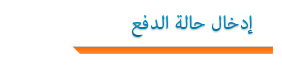
<style>
.page{position:relative;width:282px;height:69px;background:#ffffff}
.page>*{position:absolute;margin:0}
.t1{font:27px "AdobeArabic-Regular";color:#0082b5}
</style>
<div class="page">
<p class="t1" style="left:132px;top:14px;width:121px;height:23px">إدخال حالة الدفع</p>
</div>
